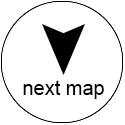
<style>
.page{position:relative;width:125px;height:125px;background:#ffffff}
.page>*{position:absolute;margin:0}
.t1{font:20px "ArialMT";color:#000000}
</style>
<div class="page">
<p class="t1" style="left:23px;top:80px;width:81px;height:19px">next map</p>
</div>
